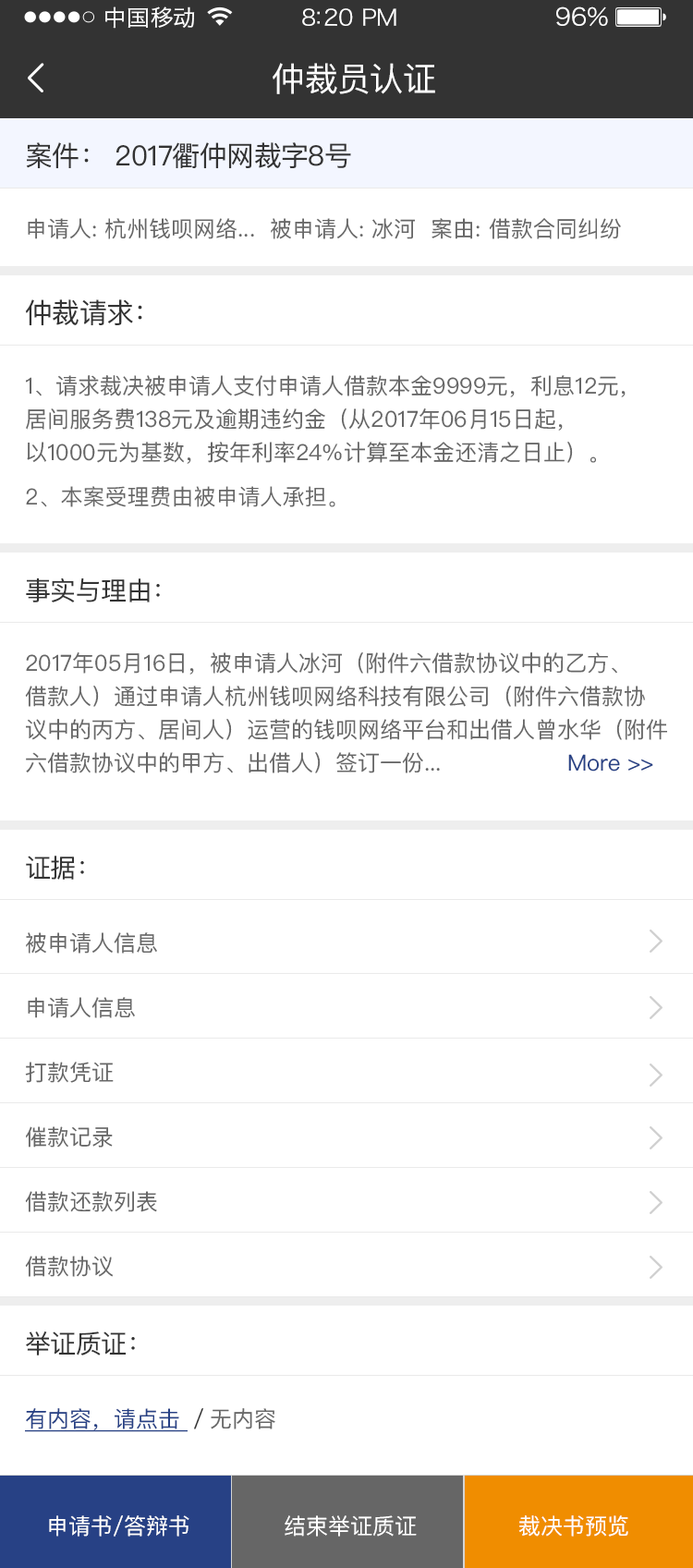
<style>
.page{position:relative;width:693px;height:1568px;background:#ffffff}
.page>*{position:absolute;margin:0}
.t1{font:22.2px "HiraginoSansGB-W3";letter-spacing:0.02em;color:#ffffff;scale:1.03 1}
.t2{font:22.2px "HiraginoSansGB-W3";letter-spacing:-0.02em;color:#ffffff;scale:1.03 1}
.t3{font:24.2px "HiraginoSansGB-W3";letter-spacing:-0.02em;color:#ffffff;scale:1.03 1}
.t4{font:33.3px "PingFangSC-Regular";letter-spacing:-0.02em;color:#ffffff}
.t5{font:27.7px "PingFangSC-Regular";letter-spacing:-0.02em;color:#333333}
.t6{font:22.2px "PingFangSC-Regular";color:#666666}
.t7{font:22.2px/33.3px "PingFangSC-Regular";color:#666666}
.t8{font:25.9px "PingFangSC-Regular";letter-spacing:-0.02em;color:#333333}
.t9{font:22.2px/33.3px "PingFangSC-Regular";color:#274185}
.t10{font:22.2px "PingFangSC-Regular";color:#274185;text-decoration:underline}
.t11{font:22.2px "PingFangSC-Regular";color:#333333}
.t12{font:22.2px "PingFangSC-Regular";color:#ffffff}
</style>
<div class="page">
<p class="t1" style="left:105px;top:6px;width:90px;height:23px">中国移动</p>
<p class="t2" style="left:302px;top:8px;width:94px;height:18px">8:20 PM</p>
<p class="t3" style="left:556px;top:6px;width:52px;height:21px">96%</p>
<p class="t4" style="left:273px;top:63px;width:162px;height:31px">仲裁员认证</p>
<p class="t5" style="left:26px;top:142px;width:325px;height:27px">案件： 2017衢仲网裁字8号</p>
<p class="t6" style="left:28px;top:218px;width:593px;height:21px">申请人: 杭州钱呗网络...  被申请人: 冰河  案由: 借款合同纠纷</p>
<p class="t5" style="left:25px;top:299px;width:117px;height:27px">仲裁请求：</p>
<p class="t7" style="left:26px;top:375px;width:600px;height:89px">1、请求裁决被申请人支付申请人借款本金9999元，利息12元，<br>居间服务费138元及逾期违约金（从2017年06月15日起，<br>以1000元为基数，按年利率24%计算至本金还清之日止）。</p>
<p class="t6" style="left:26px;top:486px;width:309px;height:21px">2、本案受理费由被申请人承担。</p>
<p class="t8" style="left:26px;top:577px;width:134px;height:25px">事实与理由：</p>
<p class="t7" style="left:25px;top:652px;width:642px;height:121px">2017年05月16日，被申请人冰河（附件六借款协议中的乙方、<br>借款人）通过申请人杭州钱呗网络科技有限公司（附件六借款协<br>议中的丙方、居间人）运营的钱呗网络平台和出借人曾水华（附件<br>六借款协议中的甲方、出借人）签订一份...     <span class="t9">            More &gt;&gt;</span></p>
<p class="t8" style="left:26px;top:856px;width:58px;height:24px">证据：</p>
<p class="t6" style="left:26px;top:932px;width:131px;height:22px">被申请人信息</p>
<p class="t6" style="left:28px;top:997px;width:107px;height:21px">申请人信息</p>
<p class="t6" style="left:25px;top:1062px;width:89px;height:21px">打款凭证</p>
<p class="t6" style="left:26px;top:1126px;width:87px;height:22px">催款记录</p>
<p class="t6" style="left:25px;top:1191px;width:132px;height:21px">借款还款列表</p>
<p class="t6" style="left:25px;top:1256px;width:89px;height:21px">借款协议</p>
<p class="t8" style="left:26px;top:1331px;width:109px;height:24px">举证质证：</p>
<p class="t10" style="left:25px;top:1408px;width:250px;height:24px">有内容，请点击 <span class="t11">／</span><span class="t6">无内容</span></p>
<p class="t12" style="left:49px;top:1515px;width:140px;height:22px">申请书/答辩书</p>
<p class="t12" style="left:285px;top:1515px;width:132px;height:22px">结束举证质证</p>
<p class="t12" style="left:518px;top:1515px;width:110px;height:22px">裁决书预览</p>
</div>
